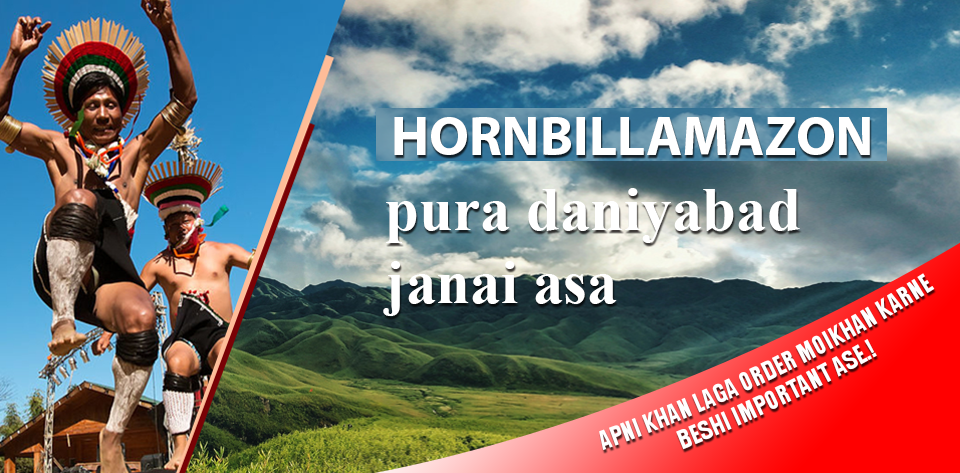
<style>
.page{position:relative;width:960px;height:473px}
.page>*{position:absolute;margin:0}
.t1{font:55.3px "MyriadPro-Bold";color:#ffffff;text-transform:uppercase}
.t2{font:61px "TimesNewRomanPS-BoldMT";color:#ffffff}
.t3{font:23.2px "Impact";color:#ffffff;text-transform:uppercase}
</style>
<div class="page">
<p class="t1" style="left:394px;top:117px;width:476px;height:38px">hornbillamazon</p>
<p class="t2" style="left:383px;top:188px;width:417px;height:128px">pura daniyabad<br>janai asa</p>
<p class="t3" style="left:599px;top:273px;width:336px;height:177px;text-align:center;rotate:-26deg">Apni khan laga order moikhan karne<br>beshi important ase.!</p>
</div>
